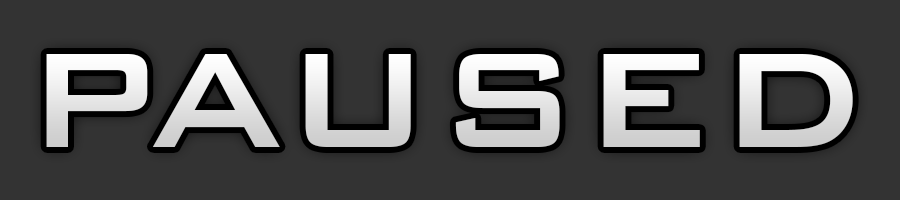
<style>
.page{position:relative;width:900px;height:200px;background:#333333}
.page>*{position:absolute;margin:0}
.t1{font:180px "BankGothicBT-Medium"}
</style>
<div class="page">
<p class="t1" style="left:46px;top:54px;width:807px;height:93px">PAUSED</p>
</div>
